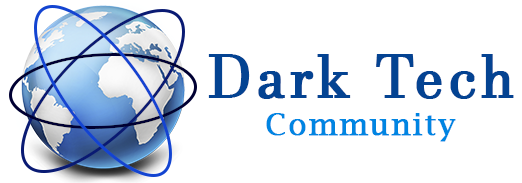
<style>
.page{position:relative;width:522px;height:183px;background:#ffffff}
.page>*{position:absolute;margin:0}
.t1{font:60px "JavaneseText";letter-spacing:0.05em;color:#044392;font-weight:bold}
.t2{font:30px "LucidaBright";letter-spacing:0.05em;color:#0085e2;font-weight:bold}
</style>
<div class="page">
<p class="t1" style="left:208px;top:54px;width:306px;height:45px">Dark Tech</p>
<p class="t2" style="left:266px;top:113px;width:190px;height:29px">Community</p>
</div>
